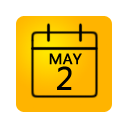
<style>
.page{position:relative;width:128px;height:128px;background:#ffffff}
.page>*{position:absolute;margin:0}
.t1{font:14px/12px "MicrosoftYaHei";color:#000000;font-weight:bold}
.t2{font:30px/12px "MicrosoftYaHei";color:#000000;font-weight:bold}
</style>
<div class="page">
<p class="t1" style="left:49px;top:53px;width:33px;height:37px;text-align:center">MAY<br><span class="t2">2</span></p>
</div>
